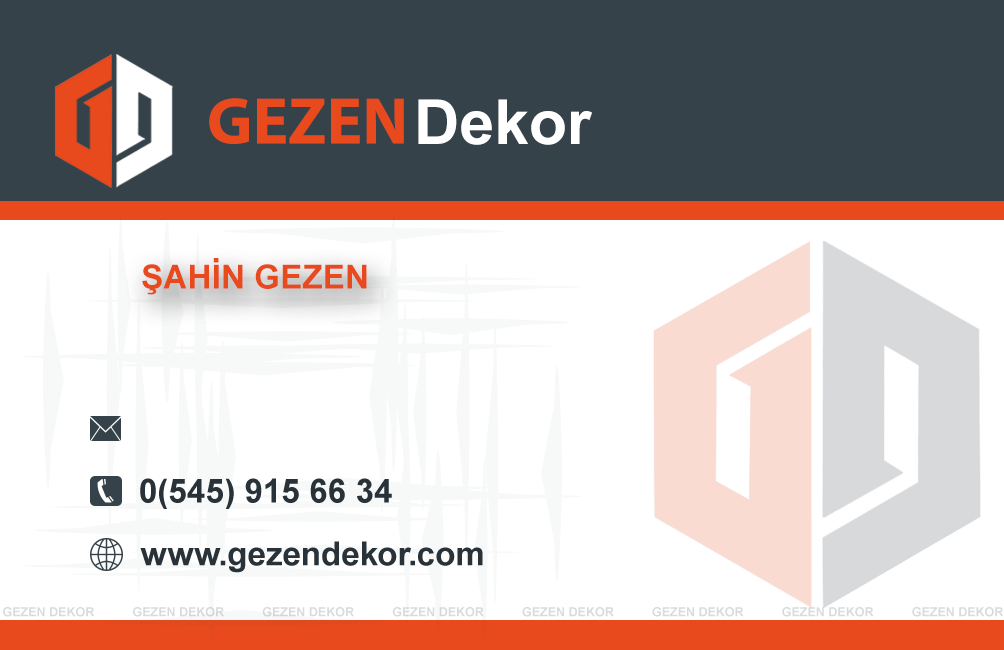
<style>
.page{position:relative;width:1004px;height:650px;background:#ffffff}
.page>*{position:absolute;margin:0}
.t1{font:66.2px "MyriadPro-Bold";color:#e8491d}
.t2{font:62.1px "Arial-BoldMT";color:#ffffff}
.t3{font:33.3px "Arial-BoldMT";color:#e8491d}
.t4{font:12.5px "Arial-BoldMT";color:#d8dadb}
</style>
<div class="page">
<p class="t1" style="left:209px;top:98px;width:195px;height:46px">GEZEN</p>
<p class="t2" style="left:418px;top:99px;width:174px;height:46px">Dekor</p>
<p class="t3" style="left:142px;top:258px;width:225px;height:37px">ŞAHİN GEZEN</p>
<p class="t4" style="left:3px;top:607px;width:1001px;height:10px">GEZEN DEKOR           GEZEN DEKOR           GEZEN DEKOR           GEZEN DEKOR           GEZEN DEKOR           GEZEN DEKOR           GEZEN DEKOR           GEZEN DEKOR</p>
</div>
